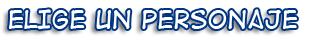
<style>
.page{position:relative;width:312px;height:46px;background:#ffffff}
.page>*{position:absolute;margin:0}
.t1{font:24px "DigitalStrip2";color:#ffffff}
</style>
<div class="page">
<p class="t1" style="left:9px;top:9px;width:288px;height:21px">elige un personaje</p>
</div>
